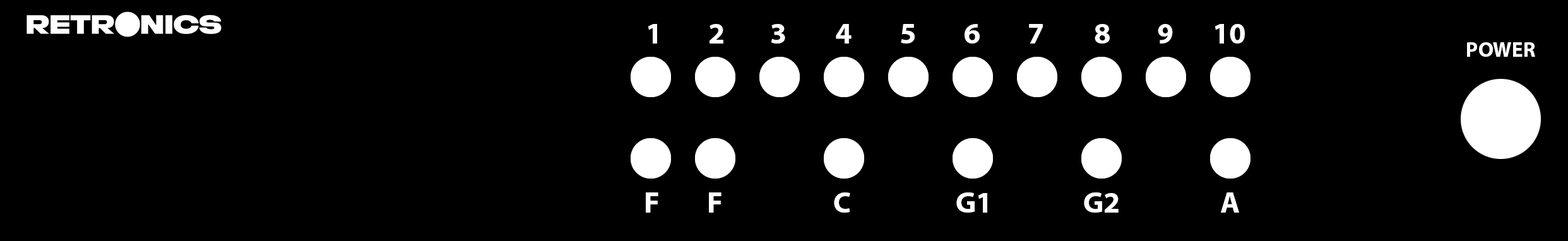
<style>
.page{position:relative;width:1568px;height:241px;background:#000000}
.page>*{position:absolute;margin:0}
.t1{font:29.8px "MyriadPro-Bold";color:#ffffff}
.t2{font:21px "MyriadPro-Bold";color:#ffffff}
</style>
<div class="page">
<p class="t1" style="left:648px;top:24px;width:9px;height:20px">1</p>
<p class="t1" style="left:710px;top:24px;width:13px;height:20px">2</p>
<p class="t1" style="left:771px;top:24px;width:14px;height:20px">3</p>
<p class="t1" style="left:836px;top:24px;width:16px;height:20px">4</p>
<p class="t1" style="left:901px;top:24px;width:14px;height:20px">5</p>
<p class="t1" style="left:965px;top:24px;width:15px;height:20px">6</p>
<p class="t1" style="left:1029px;top:24px;width:14px;height:20px">7</p>
<p class="t1" style="left:1095px;top:24px;width:15px;height:20px">8</p>
<p class="t1" style="left:1158px;top:24px;width:15px;height:20px">9</p>
<p class="t1" style="left:1215px;top:24px;width:30px;height:20px">10</p>
<p class="t2" style="left:1467px;top:42px;width:68px;height:15px">POWER</p>
<p class="t1" style="left:646px;top:193px;width:12px;height:20px">F</p>
<p class="t1" style="left:709px;top:193px;width:13px;height:20px">F</p>
<p class="t1" style="left:834px;top:193px;width:16px;height:20px">C</p>
<p class="t1" style="left:956px;top:193px;width:31px;height:20px">G1</p>
<p class="t1" style="left:1084px;top:193px;width:35px;height:20px">G2</p>
<p class="t1" style="left:1221px;top:193px;width:18px;height:20px">A</p>
</div>
